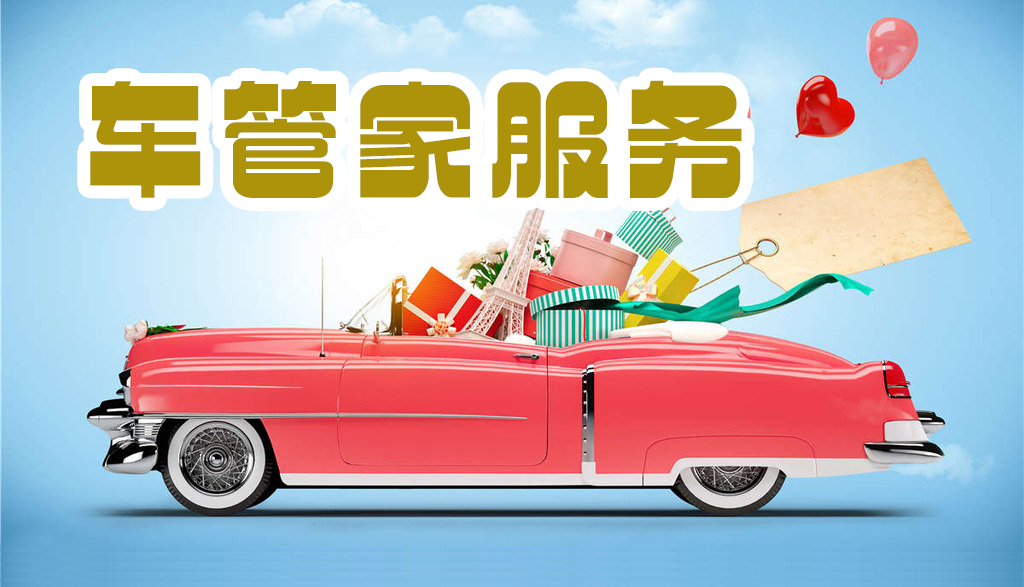
<style>
.page{position:relative;width:1024px;height:587px}
.page>*{position:absolute;margin:0}
.t1{font:123.7px "MF-ChaoFan(Noncommercial)-Regular";letter-spacing:0.1em;color:#ad9309;text-transform:uppercase}
</style>
<div class="page">
<p class="t1" style="left:90px;top:80px;width:652px;height:118px">车管家服务</p>
</div>
